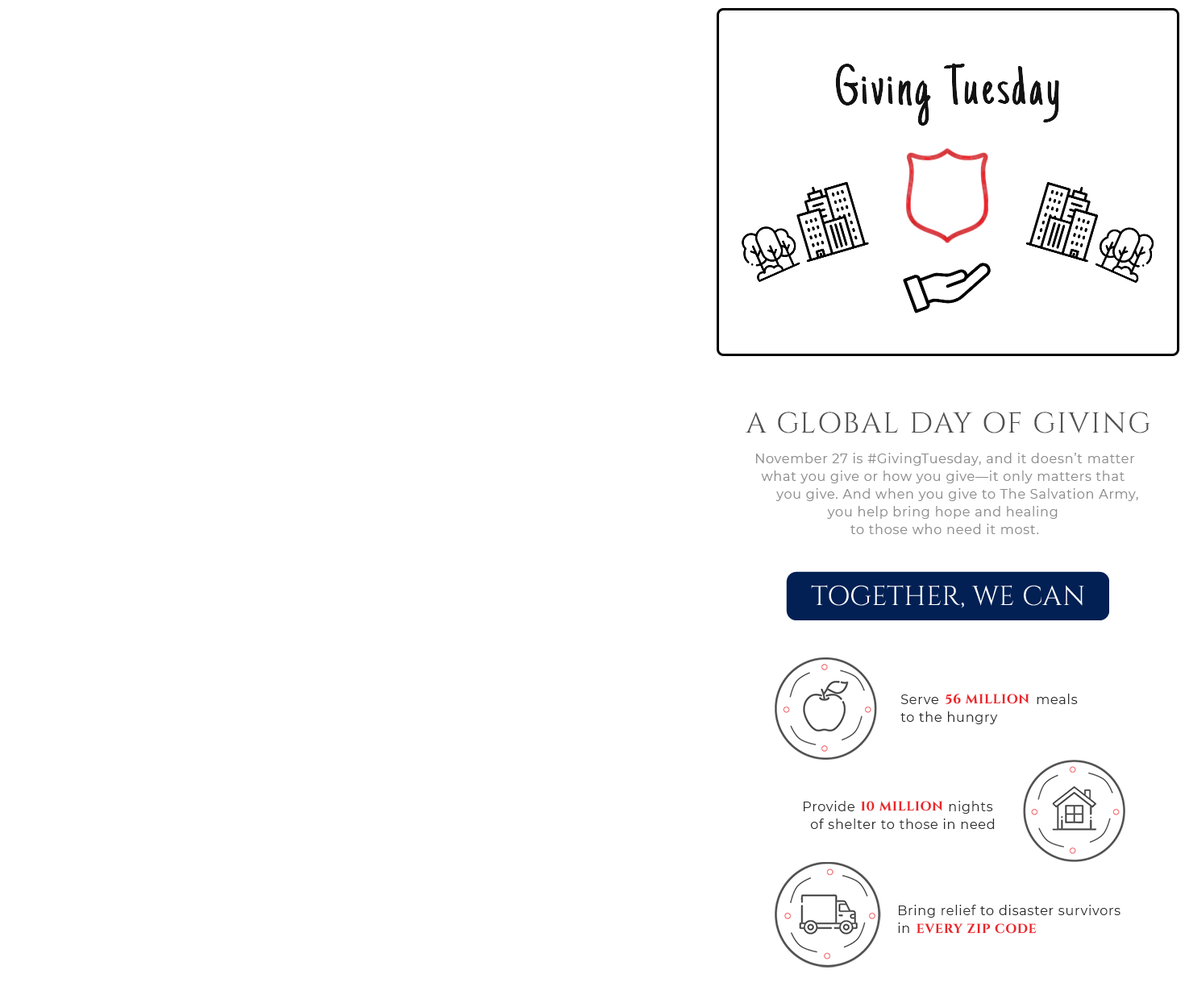
<style>
.page{position:relative;width:1189px;height:1003px;background:#ffffff}
.page>*{position:absolute;margin:0}
.t1{font:58px "JustAnotherHand-Regular";letter-spacing:0.05em;color:#262626}
.t2{font:29px "Cinzel-Regular";letter-spacing:0.05em;color:#515151}
.t3{font:12.9px/17.7px "Montserrat-Regular";letter-spacing:0.05em;color:#8e8c8e}
.t4{font:12.9px/17.7px "Montserrat-Regular";letter-spacing:0.05em;color:#2d2d2d}
.t5{font:12.9px "CinzelRoman-Bold";letter-spacing:0.05em;color:#eb2429}
</style>
<div class="page">
<p class="t1" style="left:835px;top:63px;width:224px;height:63px">Giving Tuesday</p>
<p class="t2" style="left:745px;top:412px;width:405px;height:22px">A GLOBAL DAY OF GIVING</p>
<p class="t3" style="left:756px;top:453px;width:382px;height:81px;text-align:center">November 27 is #GivingTuesday, and it doesn’t matter<br>what you give or how you give—it only matters that <br> you give. And when you give to The Salvation Army, <br>you help bring hope and healing <br>to those who need it most.</p>
<p class="t4" style="left:900px;top:694px;width:177px;height:30px">Serve                        meals<br>to the hungry</p>
<p class="t5" style="left:945px;top:694px;width:84px;height:10px">56 MILLION</p>
<p class="t4" style="left:803px;top:801px;width:191px;height:28px">Provide                       nights<br>  of shelter to those in need</p>
<p class="t5" style="left:861px;top:801px;width:82px;height:10px">10 MILLION</p>
<p class="t4" style="left:898px;top:905px;width:222px;height:28px">Bring relief to disaster survivors<br>in</p>
<p class="t5" style="left:916px;top:923px;width:120px;height:11px">EVERY ZIP CODE</p>
</div>
